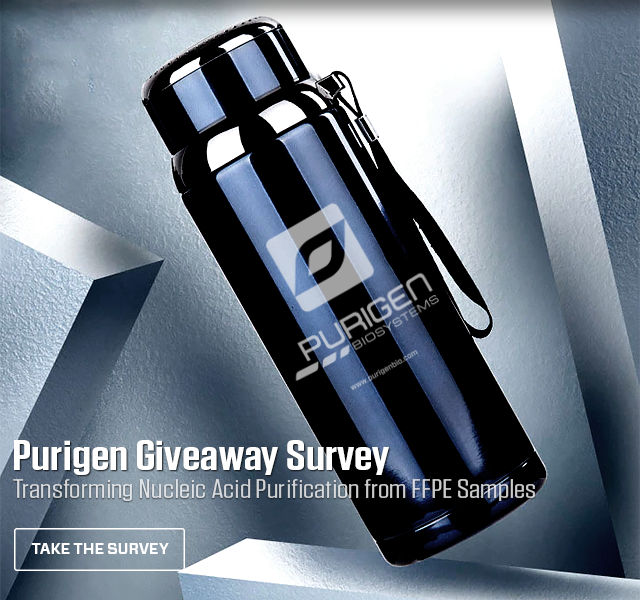
<style>
.page{position:relative;width:640px;height:600px}
.page>*{position:absolute;margin:0}
.t1{font:42px "Tungsten-Semibold";color:#ffffff;scale:1.3 1}
.t2{font:26px "Tungsten-Book";letter-spacing:0.003em;color:#d4d7db;scale:1.33 1}
.t3{font:15px "Forza-Bold";letter-spacing:-0.01em;color:#ffffff;text-transform:uppercase}
</style>
<div class="page">
<p class="t1" style="left:14px;top:440px;width:375px;height:35px">Purigen Giveaway Survey</p>
<p class="t2" style="left:13px;top:479px;width:522px;height:22px">Transforming Nucleic Acid Purification from FFPE Samples</p>
<p class="t3" style="left:31px;top:543px;width:138px;height:11px">Take the Survey</p>
</div>
